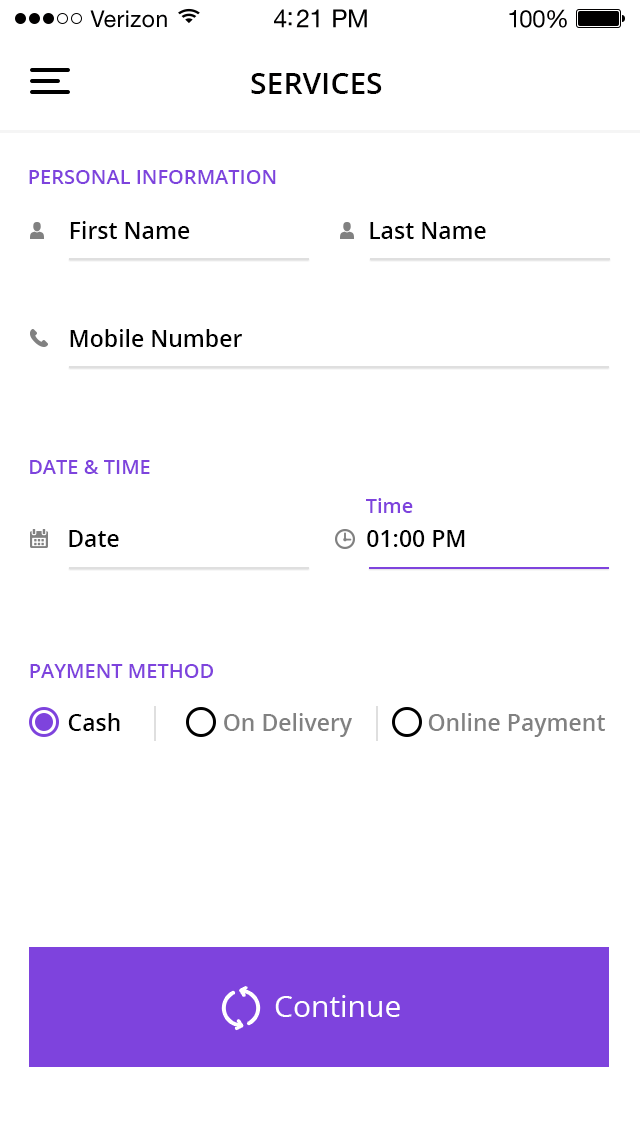
<style>
.page{position:relative;width:640px;height:1136px;background:#ffffff}
.page>*{position:absolute;margin:0}
.t1{font:23px "HelveticaNeueLTStd-Roman";letter-spacing:0.02em;color:#010000}
.t2{font:25px "HelveticaNeueLTStd-Roman";letter-spacing:-0.02em;color:#010000}
.t3{font:24px "HelveticaNeueLTStd-Roman";letter-spacing:-0.02em;color:#010000}
.t4{font:30px "OpenSans-Semibold";color:#010000}
.t5{font:20px "OpenSans-Semibold";color:#7e43dd}
.t6{font:23px "OpenSans-Semibold";color:#000000}
.t7{font:23px "OpenSans-Semibold";color:#818181}
.t8{font:30px "OpenSans";color:#ffffff}
</style>
<div class="page">
<p class="t1" style="left:90px;top:10px;width:77px;height:18px">Verizon</p>
<p class="t2" style="left:274px;top:9px;width:93px;height:19px">4:21 PM</p>
<p class="t3" style="left:509px;top:9px;width:58px;height:19px">100%</p>
<p class="t4" style="left:251px;top:73px;width:131px;height:21px">SERVICES</p>
<p class="t5" style="left:29px;top:170px;width:247px;height:14px">PERSONAL INFORMATION</p>
<p class="t6" style="left:70px;top:221px;width:120px;height:18px">First Name</p>
<p class="t6" style="left:370px;top:222px;width:116px;height:17px">Last Name</p>
<p class="t6" style="left:70px;top:329px;width:172px;height:18px">Mobile Number</p>
<p class="t5" style="left:30px;top:460px;width:120px;height:14px">DATE &amp; TIME</p>
<p class="t5" style="left:366px;top:498px;width:47px;height:15px">Time</p>
<p class="t6" style="left:69px;top:530px;width:50px;height:17px">Date</p>
<p class="t6" style="left:367px;top:530px;width:98px;height:17px">01:00 PM</p>
<p class="t5" style="left:30px;top:664px;width:183px;height:14px">PAYMENT METHOD</p>
<p class="t6" style="left:68px;top:713px;width:52px;height:18px">Cash</p>
<p class="t7" style="left:224px;top:713px;width:128px;height:24px">On Delivery</p>
<p class="t7" style="left:428px;top:713px;width:177px;height:24px">Online Payment</p>
<p class="t8" style="left:275px;top:995px;width:125px;height:22px">Continue</p>
</div>
